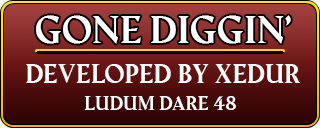
<style>
.page{position:relative;width:320px;height:128px}
.page>*{position:absolute;margin:0}
.t1{font:36px "Amagro-bold";color:#ffffff}
.t2{font:24px "Amagro-bold";color:#ffffff}
.t3{font:18px "Amagro-bold";color:#ffffff}
</style>
<div class="page">
<p class="t1" style="left:36px;top:15px;width:255px;height:29px">Gone Diggin’</p>
<p class="t2" style="left:26px;top:64px;width:274px;height:19px">Developed by Xedur</p>
<p class="t3" style="left:84px;top:96px;width:152px;height:14px">LUDUM DARE 48</p>
</div>
